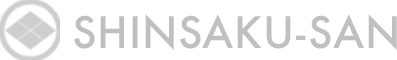
<style>
.page{position:relative;width:397px;height:60px;background:#ffffff}
.page>*{position:absolute;margin:0}
.t1{font:42px "Futura-Medium";letter-spacing:0.025em;color:#c1c0c0}
</style>
<div class="page">
<p class="t1" style="left:74px;top:14px;width:323px;height:36px">SHINSAKU-SAN</p>
</div>
